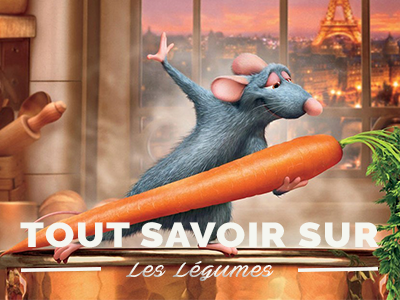
<style>
.page{position:relative;width:400px;height:300px}
.page>*{position:absolute;margin:0}
.t1{font:34.5px "Raleway-Black";letter-spacing:0.04em;color:#f5f6f0;scale:1.11 1}
.t2{font:20.7px "AveBetwanPERSONALUSEONLY";letter-spacing:0.04em;color:#f5f6f0;scale:1.11 1}
</style>
<div class="page">
<p class="t1" style="left:20px;top:222px;width:359px;height:26px">TOUT SAVOIR SUR</p>
<p class="t2" style="left:126px;top:261px;width:148px;height:20px">Les Légumes</p>
</div>
